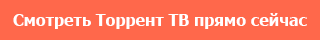
<style>
.page{position:relative;width:320px;height:40px;background:#ff684b}
.page>*{position:absolute;margin:0}
.t1{font:12px "Tahoma-Bold";color:#ffffff}
</style>
<div class="page">
<p class="t1" style="left:13px;top:13px;width:294px;height:16px">Смотреть Торрент ТВ прямо сейчас</p>
</div>
